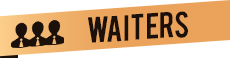
<style>
.page{position:relative;width:230px;height:58px;background:#ffffff}
.page>*{position:absolute;margin:0}
.t1{font:28.8px "Bebas";color:#1c100b}
</style>
<div class="page">
<p class="t1" style="left:87px;top:11px;width:101px;height:32px;rotate:-4deg">waiters</p>
</div>
